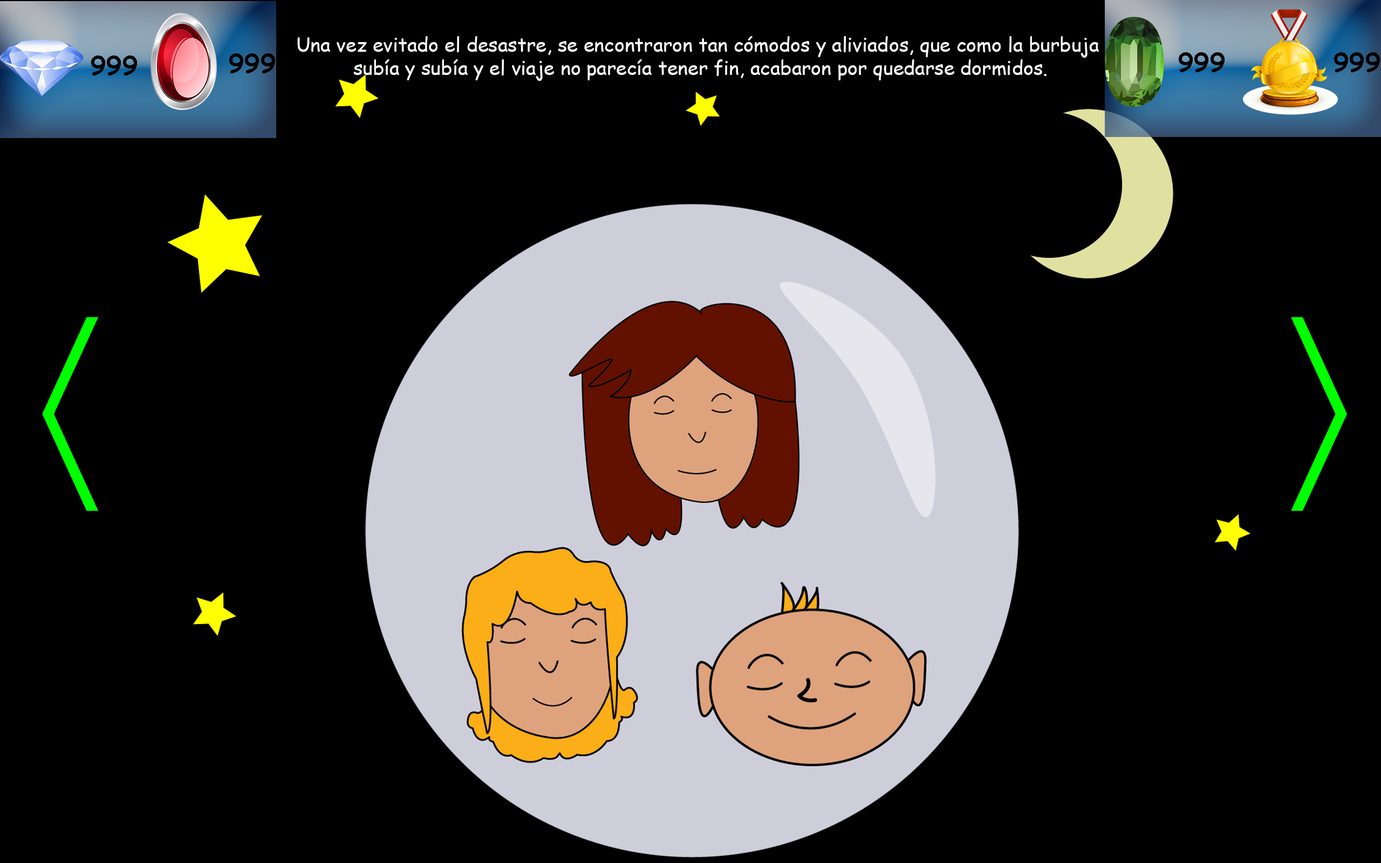
<style>
.page{position:relative;width:1381px;height:863px;background:#000000}
.page>*{position:absolute;margin:0}
.t1{font:19.4px "ComicSansMS";color:#ffffff}
.t2{font:25.9px "ComicSansMS-Bold";color:#010101}
.t3{font:25.9px "ComicSansMS-Bold";color:#000000}
</style>
<div class="page">
<p class="t1" style="left:297px;top:36px;width:802px;height:45px;text-align:center">Una vez evitado el desastre, se encontraron tan cómodos y aliviados, que como la burbuja <br>subía y subía y el viaje no parecía tener fin, acabaron por quedarse dormidos.</p>
<p class="t2" style="left:229px;top:53px;width:46px;height:20px">999</p>
<p class="t2" style="left:1179px;top:52px;width:46px;height:20px">999</p>
<p class="t3" style="left:1334px;top:52px;width:46px;height:20px">999</p>
<p class="t3" style="left:91px;top:56px;width:46px;height:20px">999</p>
</div>
